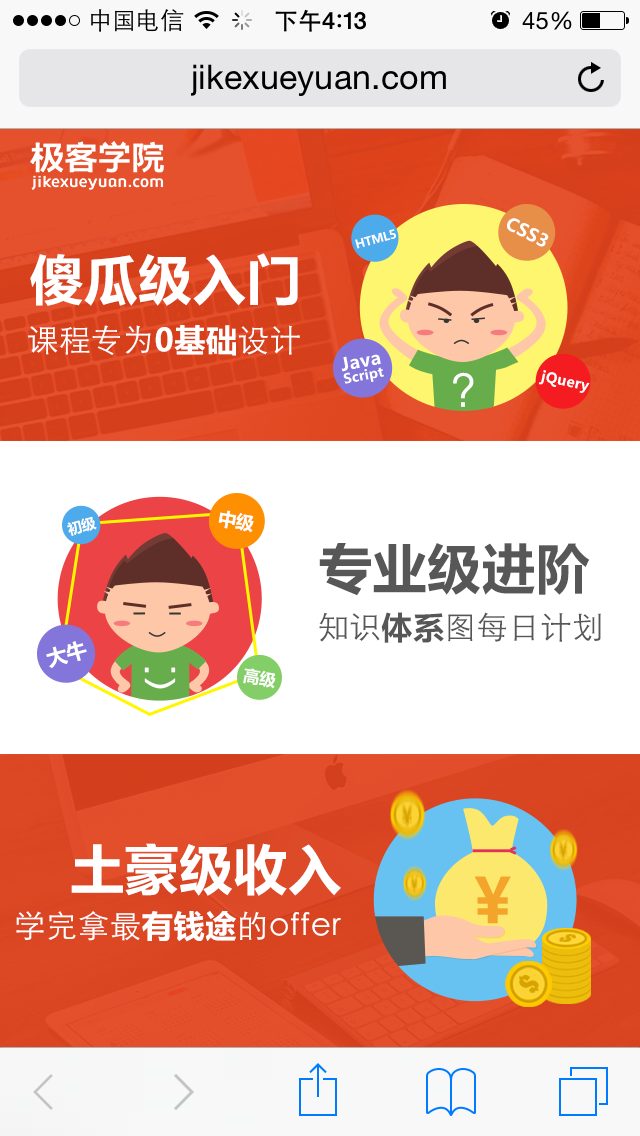
<style>
.page{position:relative;width:640px;height:1136px;background:#ffffff}
.page>*{position:absolute;margin:0}
.t1{font:17.7px "MicrosoftYaHei-Bold";letter-spacing:0.02em;color:#ffffff}
.t2{font:12px "MicrosoftYaHei-Bold";letter-spacing:-0.027em;color:#ffffff}
.t3{font:53.4px "MicrosoftYaHei-Bold";letter-spacing:0.02em;color:#ffffff}
.t4{font:31.2px "STHeitiSC-Light";letter-spacing:0.02em;color:#ffffff}
.t5{font:31.2px "MicrosoftYaHei-Bold";letter-spacing:0.02em;color:#ffffff}
.t6{font:13.4px/16.7px "MicrosoftYaHei-Bold";letter-spacing:0.02em;color:#ffffff}
.t7{font:17.8px/16.7px "MicrosoftYaHei-Bold";letter-spacing:0.02em;color:#ffffff}
.t8{font:47.4px "STHeitiSC-Light";letter-spacing:0.02em;color:#ffffff;font-weight:bold}
.t9{font:14px "MicrosoftYaHei-Bold";letter-spacing:0.02em;color:#ffffff}
.t10{font:18.3px "MicrosoftYaHei-Bold";letter-spacing:-0.027em;color:#ffffff}
.t11{font:14.5px "MicrosoftYaHei-Bold";letter-spacing:-0.027em;color:#ffffff}
.t12{font:53.4px "MicrosoftYaHei-Bold";letter-spacing:0.02em;color:#575757}
.t13{font:31.2px "STHeitiSC-Light";letter-spacing:0.02em;color:#575757}
.t14{font:31.2px "MicrosoftYaHei-Bold";letter-spacing:0.02em;color:#575757}
.t15{font:20.7px "MicrosoftYaHei-Bold";letter-spacing:-0.027em;color:#ffffff}
.t16{font:16.6px "MicrosoftYaHei-Bold";letter-spacing:-0.027em;color:#ffffff}
.t17{font:61.4px "MicrosoftYaHei-Bold";letter-spacing:0.02em;color:#f4a32b;font-weight:bold}
</style>
<div class="page">
<p class="t1" style="left:507px;top:218px;width:42px;height:29px;rotate:27deg">CSS3</p>
<p class="t2" style="left:355px;top:229px;width:41px;height:20px;rotate:-15deg">HTML5</p>
<p class="t3" style="left:30px;top:253px;width:268px;height:53px">傻瓜级入门</p>
<p class="t4" style="left:28px;top:325px;width:272px;height:31px">课程专为<span class="t5">0基础</span>设计</p>
<p class="t6" style="left:341px;top:354px;width:43px;height:30px;text-align:center;rotate:-11deg"><span class="t7">Java<br></span>Script</p>
<p class="t8" style="left:453px;top:372px;width:21px;height:35px">？</p>
<p class="t9" style="left:538px;top:370px;width:52px;height:23px;rotate:12deg">jQuery</p>
<p class="t10" style="left:218px;top:510px;width:36px;height:23px;rotate:10deg">中级</p>
<p class="t11" style="left:67px;top:516px;width:30px;height:20px;rotate:-15deg">初级</p>
<p class="t12" style="left:319px;top:543px;width:271px;height:53px">专业级进阶</p>
<p class="t13" style="left:319px;top:612px;width:282px;height:31px">知识<span class="t14">体系</span>图每日计划</p>
<p class="t15" style="left:46px;top:641px;width:41px;height:28px;rotate:-15deg">大牛</p>
<p class="t16" style="left:243px;top:668px;width:33px;height:21px;rotate:10deg">高级</p>
<p class="t3" style="left:71px;top:843px;width:270px;height:53px">土豪级收入</p>
<p class="t17" style="left:474px;top:876px;width:37px;height:48px">¥</p>
<p class="t4" style="left:16px;top:911px;width:325px;height:31px">学完拿最<span class="t5">有钱途</span>的offer</p>
</div>
